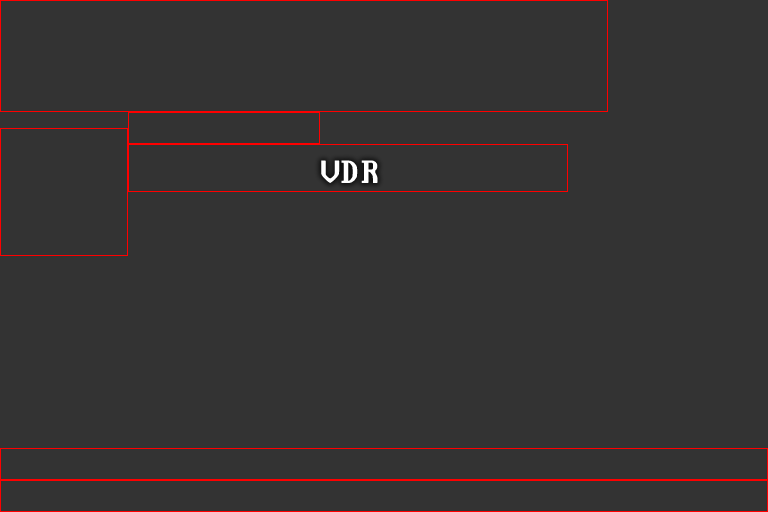
<style>
.page{position:relative;width:768px;height:512px;background:#333333}
.page>*{position:absolute;margin:0}
.t1{font:36px "Flexi_IBM_VGA_False";color:#ffffff}
</style>
<div class="page">
<p class="t1" style="left:321px;top:160px;width:57px;height:23px">VDR</p>
</div>
